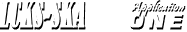
<style>
.page{position:relative;width:187px;height:32px;background:#ffffff}
.page>*{position:absolute;margin:0}
.t1{font:34px "BernardMT-Condensed";color:#ffffff;font-weight:bold;font-style:italic;scale:0.7 1}
.t2{font:19.7px "Square721BT-Bold";letter-spacing:0.2em;color:#ffffff;font-weight:bold;font-style:italic}
</style>
<div class="page">
<p class="t1" style="left:0px;top:0px;width:85px;height:28px">LCKS-SKA</p>
<p class="t2" style="left:129px;top:13px;width:54px;height:15px">ONE</p>
</div>
